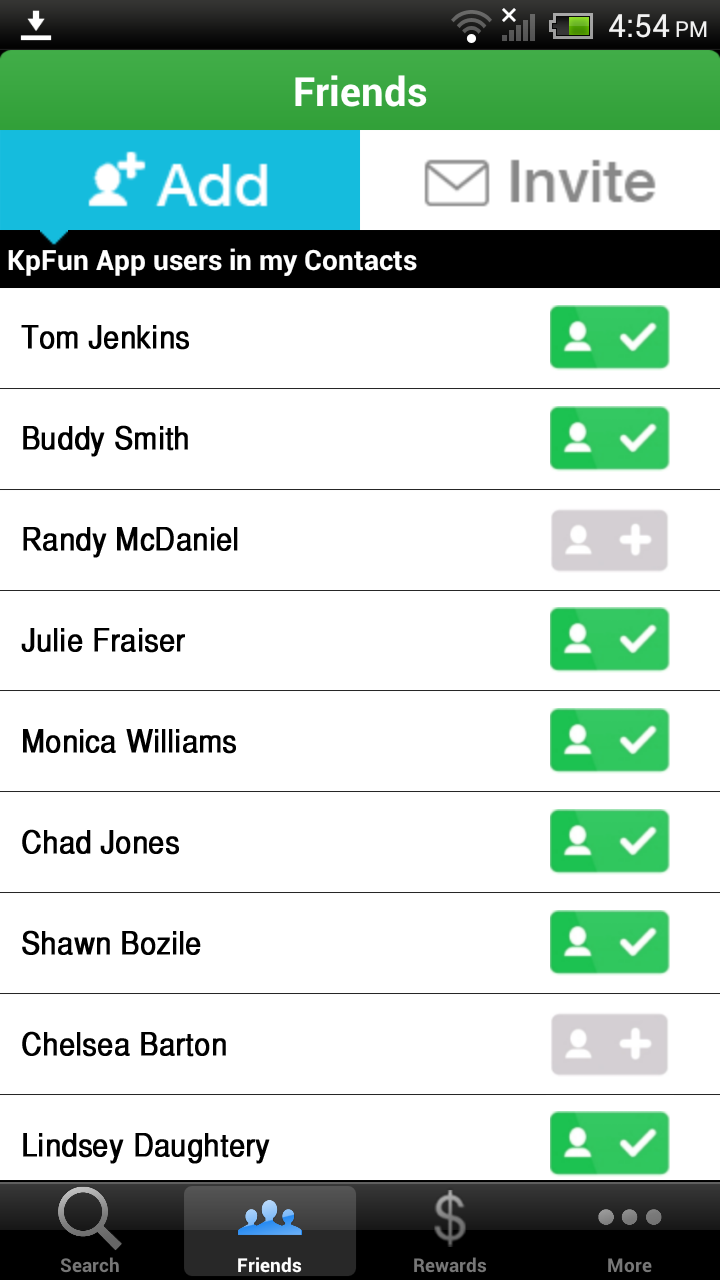
<style>
.page{position:relative;width:720px;height:1280px;background:#ffffff}
.page>*{position:absolute;margin:0}
.t1{font:31.5px/101px "HelveticaCYPlain";color:#000000;font-weight:bold;scale:1.09 1}
</style>
<div class="page">
<p class="t1" style="left:21px;top:325px;width:249px;height:839px">Tom Jenkins<br>Buddy Smith<br>Randy McDaniel<br>Julie Fraiser<br>Monica Williams<br>Chad Jones<br>Shawn Bozile<br>Chelsea Barton<br>Lindsey Daughtery</p>
</div>
